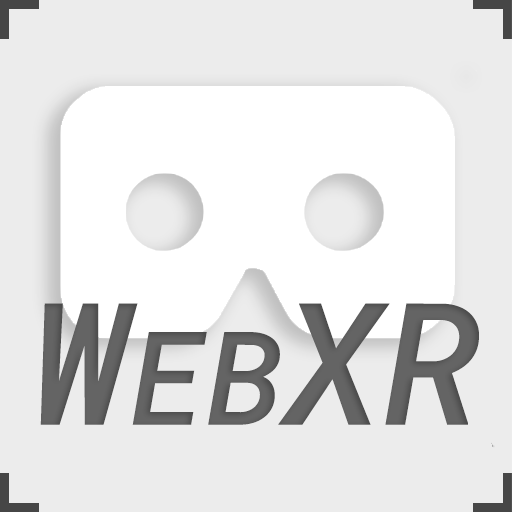
<style>
.page{position:relative;width:512px;height:512px;background:#ececec}
.page>*{position:absolute;margin:0}
.t1{font:130px "RobotoMono-MediumItalic";color:#646464}
.t2{font:170px "RobotoMono-MediumItalic";color:#646464}
</style>
<div class="page">
<p class="t1" style="left:40px;top:303px;width:439px;height:122px"><span class="t2">W</span>EB<span class="t2">XR</span></p>
</div>
